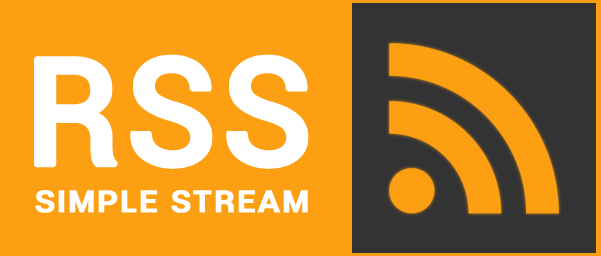
<style>
.page{position:relative;width:601px;height:256px;background:#fd9f13}
.page>*{position:absolute;margin:0}
.t1{font:150px "Roboto-Medium";color:#ffffff;font-weight:bold}
.t2{font:38px "Roboto-Medium";color:#ffffff;font-variant:small-caps;font-weight:bold}
</style>
<div class="page">
<p class="t1" style="left:34px;top:54px;width:275px;height:115px">RSS</p>
<p class="t2" style="left:35px;top:190px;width:273px;height:23px">Simple Stream</p>
</div>
